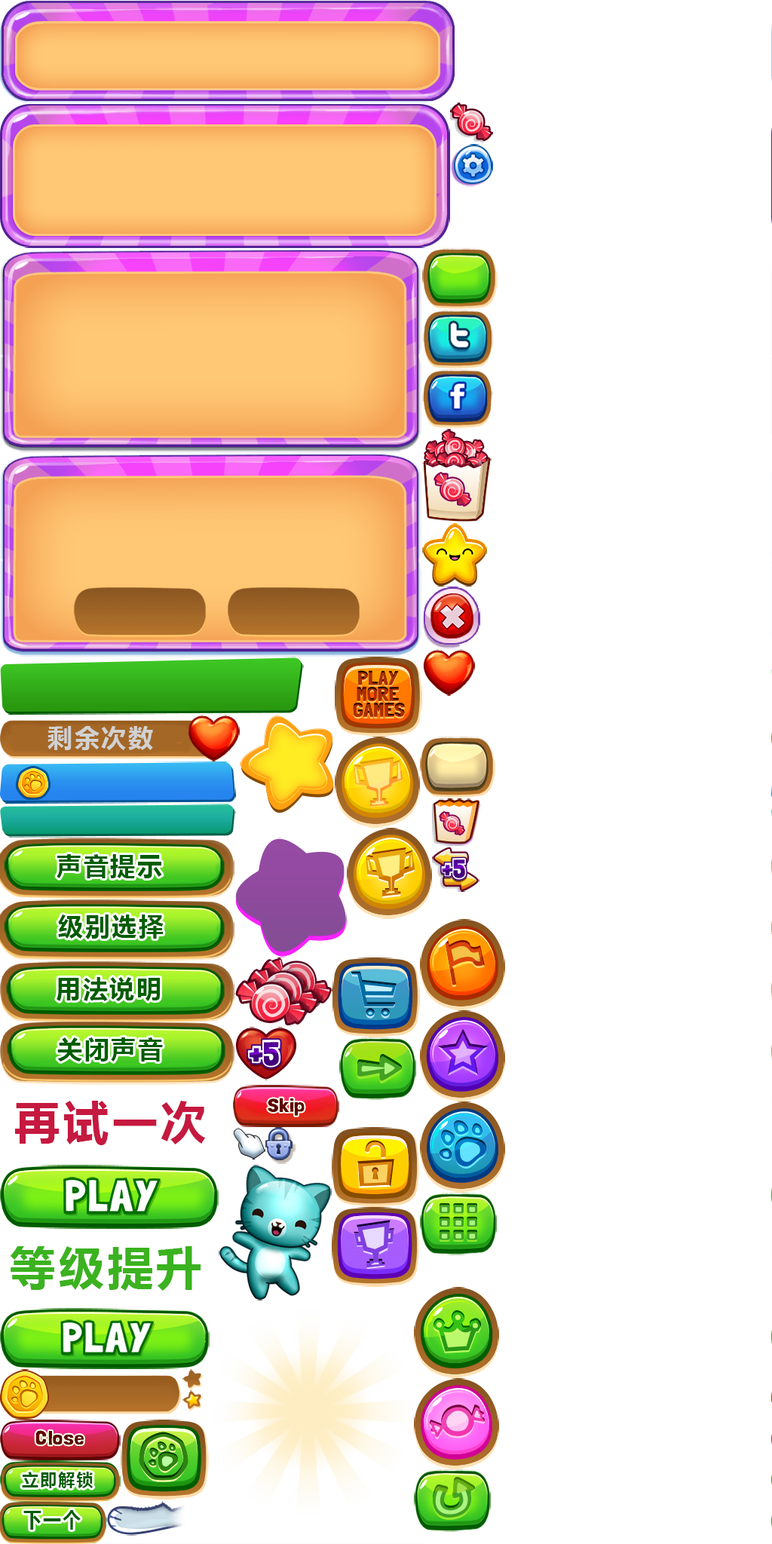
<style>
.page{position:relative;width:772px;height:1544px;background:#ffffff}
.page>*{position:absolute;margin:0}
.t1{font:24.9px "MicrosoftYaHei-Bold";letter-spacing:0.08em;color:#d1d1d1;text-transform:uppercase}
.t2{font:24.9px "MicrosoftYaHei-Bold";letter-spacing:0.08em;color:#005d00;text-transform:uppercase}
.t3{font:45.2px "MicrosoftYaHei-Bold";letter-spacing:0.08em;color:#c51940;text-transform:uppercase}
.t4{font:45.2px "MicrosoftYaHei-Bold";letter-spacing:0.08em;color:#3bb21f;text-transform:uppercase}
.t5{font:17.5px "MicrosoftYaHei-Bold";letter-spacing:0.08em;color:#005d00;text-transform:uppercase;scale:0.96 1}
.t6{font:19.8px "MicrosoftYaHei-Bold";letter-spacing:0.08em;color:#005d00;text-transform:uppercase;scale:0.92 1}
</style>
<div class="page">
<p class="t1" style="left:48px;top:726px;width:105px;height:24px">剩余次数</p>
<p class="t2" style="left:57px;top:854px;width:105px;height:24px">声音提示</p>
<p class="t2" style="left:58px;top:915px;width:106px;height:25px">级别选择</p>
<p class="t2" style="left:57px;top:977px;width:103px;height:24px">用法说明</p>
<p class="t2" style="left:57px;top:1038px;width:106px;height:24px">关闭声音</p>
<p class="t3" style="left:15px;top:1101px;width:191px;height:44px">再试一次</p>
<p class="t4" style="left:10px;top:1246px;width:191px;height:45px">等级提升</p>
<p class="t5" style="left:22px;top:1472px;width:72px;height:17px">立即解锁</p>
<p class="t6" style="left:23px;top:1510px;width:58px;height:20px">下一个</p>
</div>
